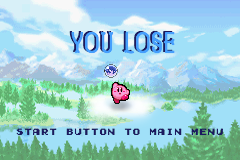
<style>
.page{position:relative;width:240px;height:160px}
.page>*{position:absolute;margin:0}
.t1{font:29.2px "ZenzeroGrotesk-Regular"}
.t2{font:29.2px "ZenzeroGrotesk-Regular";color:#469ffc}
.t3{font:8.3px "GamegirlClassic";color:#1b1960}
</style>
<div class="page">
<p class="t1" style="left:69px;top:30px;width:104px;height:23px">YOU LOSE</p>
<p class="t2" style="left:71px;top:31px;width:104px;height:23px">YOU LOSE</p>
<p class="t3" style="left:16px;top:128px;width:207px;height:7px">START BUTTON TO MAIN MENU</p>
</div>
